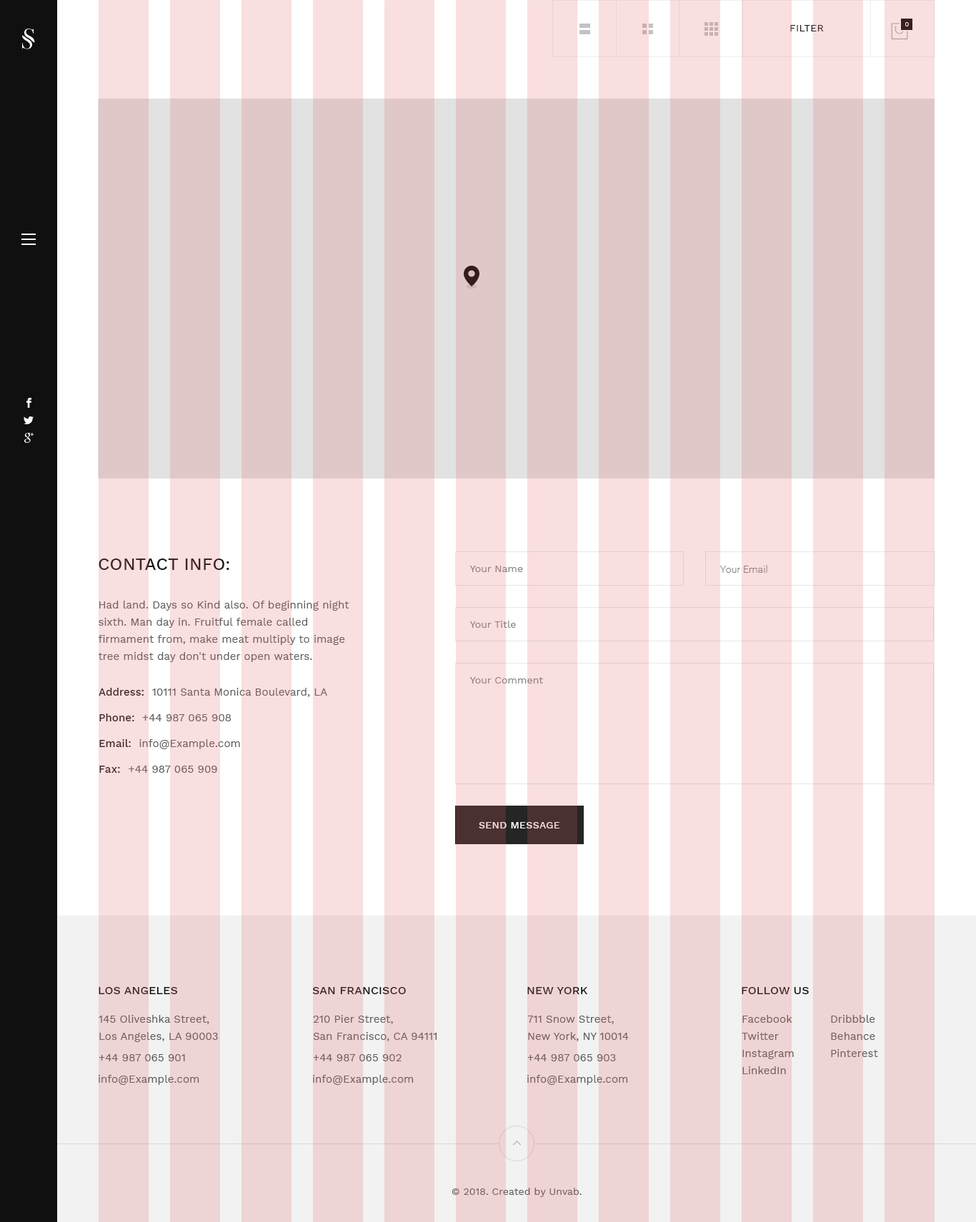
<style>
.page{position:relative;width:976px;height:1222px;background:#f9dfdf}
.page>*{position:absolute;margin:0}
.t1{font:10px "WorkSans-Regular";letter-spacing:0.025em;text-transform:uppercase}
.t2{font:6.4px "WorkSans-Regular";letter-spacing:0.025em;color:#f9dfdf;text-transform:uppercase}
.t3{font:17.1px "WorkSans-Medium";letter-spacing:0.01em;color:#3f2525;text-transform:uppercase}
.t4{font:10px "WorkSans-Regular";letter-spacing:0.005em;color:#858585}
.t5{font:10px "Roboto-Light";letter-spacing:0.01em;color:#858585}
.t6{font:10.7px/17.1px "WorkSans-Regular";letter-spacing:0.005em;color:#795f5f}
.t7{font:10.7px/25.7px "WorkSans-Regular";letter-spacing:0.005em}
.t8{font:10.7px/25.7px "WorkSans-Medium";letter-spacing:0.005em}
.t9{font:10.7px/25.7px "WorkSans-Medium";letter-spacing:0.025em}
.t10{font:10px "WorkSans-Medium";letter-spacing:0.025em;color:#f9dfdf;text-transform:uppercase}
.t11{font:11.4px "WorkSans-Medium";letter-spacing:0.01em;text-transform:uppercase}
.t12{font:11.4px "WorkSans-Medium";letter-spacing:0.01em;color:#381e1e;text-transform:uppercase}
.t13{font:10.7px "WorkSans-Regular";letter-spacing:0.005em;color:#795f5f}
.t14{font:10px "WorkSans-Regular";letter-spacing:0.005em;color:#795f5f}
</style>
<div class="page">
<p class="t1" style="left:790px;top:25px;width:34px;height:6px">filter</p>
<p class="t2" style="left:905px;top:22px;width:4px;height:4px">0</p>
<p class="t3" style="left:99px;top:559px;width:130px;height:11px">Contact Info:</p>
<p class="t4" style="left:469px;top:566px;width:54px;height:6px">Your Name</p>
<p class="t5" style="left:719px;top:565px;width:48px;height:8px">Your Email</p>
<p class="t6" style="left:98px;top:601px;width:251px;height:61px">Had land. Days so Kind also. Of beginning night <br>sixth. Man day in. Fruitful female called <br>firmament from, make meat multiply to image <br>tree midst day don't under open waters.</p>
<p class="t4" style="left:469px;top:621px;width:47px;height:7px">Your Title</p>
<p class="t4" style="left:469px;top:677px;width:74px;height:7px">Your Comment</p>
<p class="t7" style="left:99px;top:688px;width:228px;height:85px"><span class="t8">Address:  </span>10111 Santa Monica Boulevard, LA<br><span class="t8">Phone:  </span>+44 987 065 908<br><span class="t8">Email:  </span>info@Example.com<br><span class="t9">Fax:  </span>+44 987 065 909</p>
<p class="t10" style="left:479px;top:822px;width:81px;height:7px">send message</p>
<p class="t11" style="left:99px;top:987px;width:78px;height:7px">los angeles</p>
<p class="t12" style="left:312px;top:987px;width:94px;height:7px">San Francisco</p>
<p class="t12" style="left:527px;top:987px;width:61px;height:7px">New York</p>
<p class="t12" style="left:741px;top:987px;width:68px;height:7px">follow us</p>
<p class="t6" style="left:99px;top:1015px;width:119px;height:27px">145 Oliveshka Street, <br>Los Angeles, LA 90003</p>
<p class="t6" style="left:313px;top:1015px;width:123px;height:26px">210 Pier Street,<br>San Francisco, CA 94111</p>
<p class="t6" style="left:527px;top:1016px;width:102px;height:25px">711 Snow Street, <br>New York, NY 10014</p>
<p class="t6" style="left:741px;top:1015px;width:53px;height:59px">Facebook<br>Twitter<br>Instagram<br>LinkedIn</p>
<p class="t6" style="left:831px;top:1015px;width:47px;height:42px">Dribbble<br>Behance<br>Pinterest</p>
<p class="t13" style="left:99px;top:1054px;width:86px;height:7px">+44 987 065 901</p>
<p class="t13" style="left:313px;top:1054px;width:88px;height:7px">+44 987 065 902</p>
<p class="t13" style="left:527px;top:1054px;width:89px;height:7px">+44 987 065 903</p>
<p class="t13" style="left:99px;top:1075px;width:100px;height:10px">info@Example.com</p>
<p class="t13" style="left:313px;top:1075px;width:101px;height:10px">info@Example.com</p>
<p class="t13" style="left:527px;top:1075px;width:101px;height:10px">info@Example.com</p>
<p class="t14" style="left:451px;top:1188px;width:130px;height:9px">© 2018. Created by Unvab.</p>
</div>
